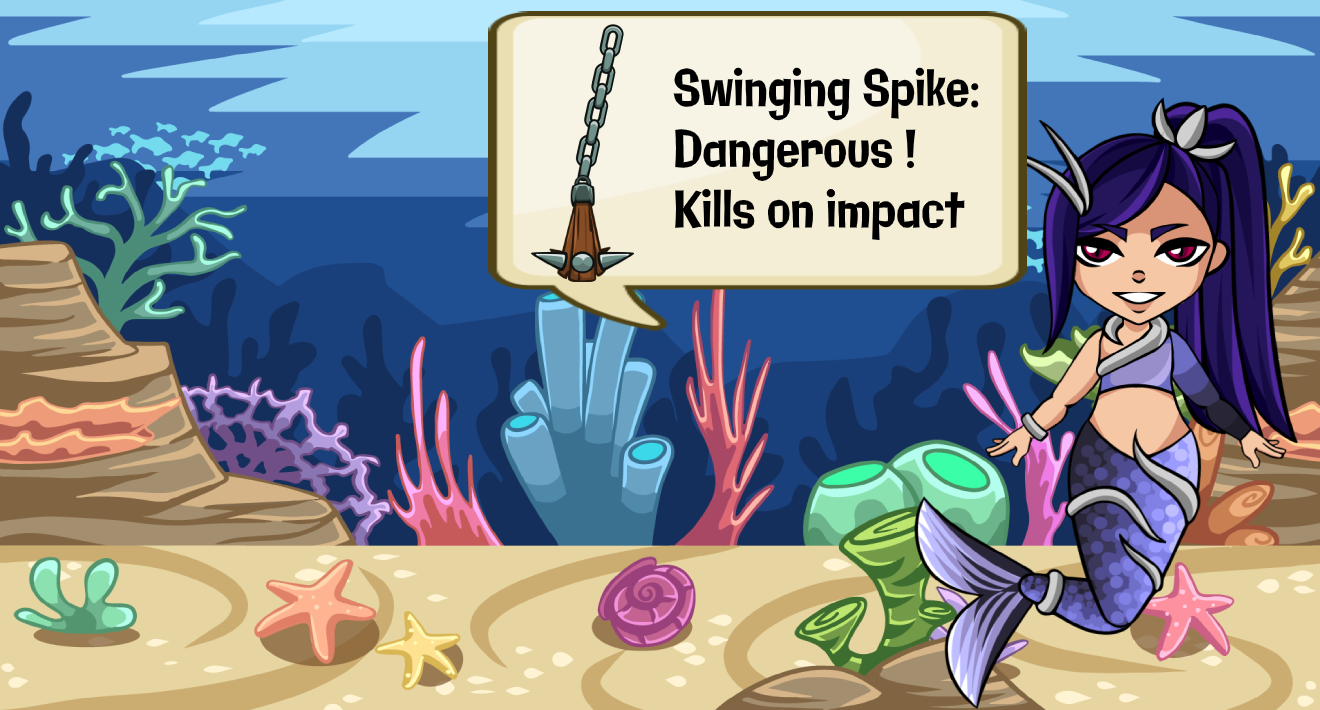
<style>
.page{position:relative;width:1320px;height:710px}
.page>*{position:absolute;margin:0}
.t1{font:50.5px "Galindo-Regular";color:#000000;scale:0.77 1}
</style>
<div class="page">
<p class="t1" style="left:673px;top:67px;width:306px;height:173px">Swinging Spike: <br>Dangerous !<br>Kills on impact</p>
</div>
